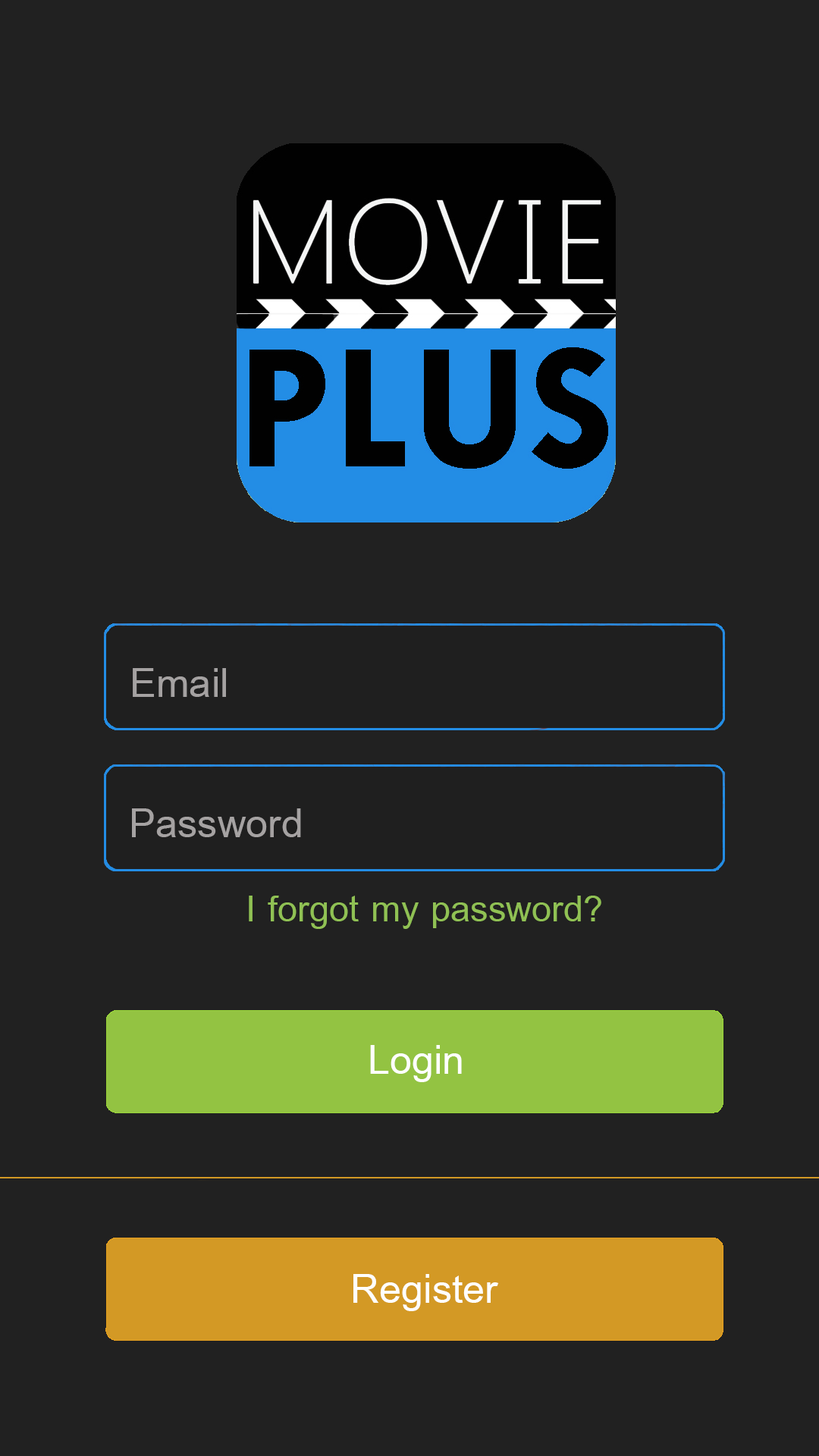
<style>
.page{position:relative;width:819px;height:1456px;background:#212121}
.page>*{position:absolute;margin:0}
.t1{font:60.7px "BrowalliaNew";color:#a5a2a2}
.t2{font:54.6px "BrowalliaNew";color:#90c154}
.t3{font:60.7px "BrowalliaNew";color:#fefefe}
</style>
<div class="page">
<p class="t1" style="left:133px;top:668px;width:93px;height:29px">Email</p>
<p class="t1" style="left:132px;top:808px;width:169px;height:29px">Password</p>
<p class="t2" style="left:249px;top:896px;width:352px;height:33px">I forgot my password?</p>
<p class="t3" style="left:370px;top:1045px;width:92px;height:37px">Login</p>
<p class="t3" style="left:353px;top:1274px;width:146px;height:37px">Register</p>
</div>
